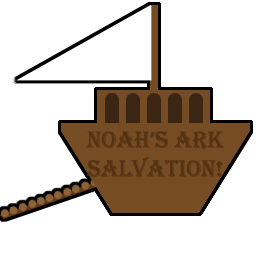
<style>
.page{position:relative;width:256px;height:256px;background:#ffffff}
.page>*{position:absolute;margin:0}
.t1{font:24px "Algerian";color:#543211}
</style>
<div class="page">
<p class="t1" style="left:86px;top:131px;width:139px;height:46px;text-align:center">Noah’s Ark<br>SALVATION!</p>
</div>
